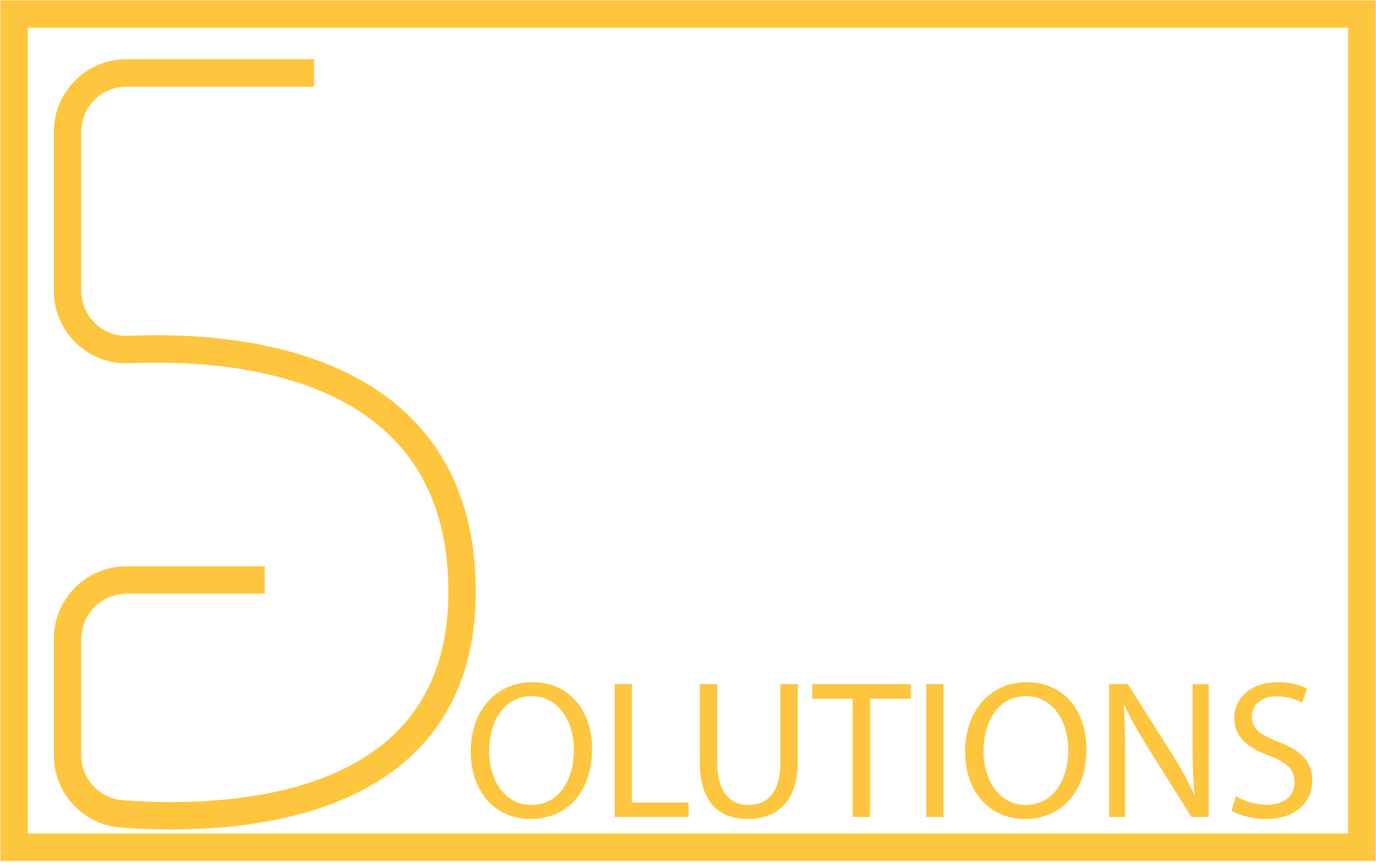
<style>
.page{position:relative;width:1376px;height:867px;background:#ffffff}
.page>*{position:absolute;margin:0}
.t1{font:197.2px "MyriadPro-Regular";color:#fec63e}
</style>
<div class="page">
<p class="t1" style="left:471px;top:682px;width:841px;height:137px">OLUTIONS</p>
</div>
